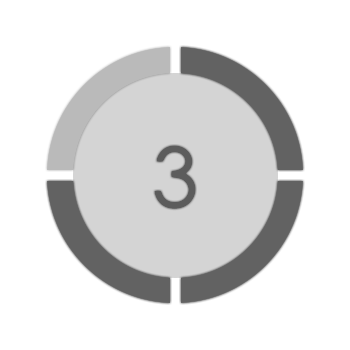
<style>
.page{position:relative;width:350px;height:350px;background:#ffffff}
.page>*{position:absolute;margin:0}
.t1{font:82.4px "CenturyGothic";color:#5c5c5c}
</style>
<div class="page">
<p class="t1" style="left:154px;top:146px;width:41px;height:63px">3</p>
</div>
